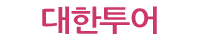
<style>
.page{position:relative;width:200px;height:40px;background:#ffffff}
.page>*{position:absolute;margin:0}
.t1{font:29px "NanumGothicBold";letter-spacing:-0.05em;color:#cc3669;scale:1.16 1}
</style>
<div class="page">
<p class="t1" style="left:42px;top:6px;width:115px;height:28px">대한투어</p>
</div>
